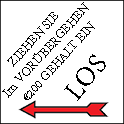
<style>
.page{position:relative;width:124px;height:124px;background:#ffffff}
.page>*{position:absolute;margin:0}
.t1{font:14px "AdobeDevanagari-Regular";color:#000000}
.t2{font:30px "AdobeDevanagari-Regular";color:#000000}
</style>
<div class="page">
<p class="t1" style="left:2px;top:2px;width:93px;height:98px;text-align:center;rotate:-48deg">ZIEHEN SIE<br>Im VORÜBERGEHEN<br>€200 GEHALT EIN</p>
<p class="t2" style="left:64px;top:54px;width:42px;height:47px;rotate:-51deg">LOS</p>
</div>
